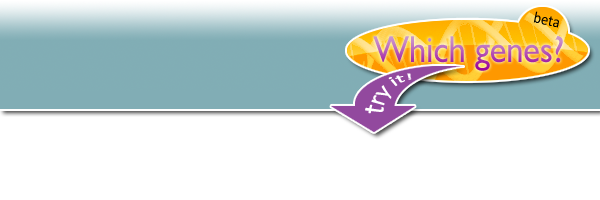
<style>
.page{position:relative;width:600px;height:200px;background:#ffffff}
.page>*{position:absolute;margin:0}
.t1{font:16.1px "Calibri";color:#000000;scale:0.91 1}
.t2{font:37.7px "GillSansMT";scale:0.91 1}
.t3{font:19.8px "Calibri";color:#ffffff;scale:0.91 1}
</style>
<div class="page">
<p class="t1" style="left:533px;top:11px;width:26px;height:17px;rotate:12deg">beta</p>
<p class="t2" style="left:373px;top:36px;width:190px;height:35px">Which genes?</p>
<p class="t3" style="left:365px;top:73px;width:47px;height:41px;rotate:-43deg">try it!</p>
</div>
